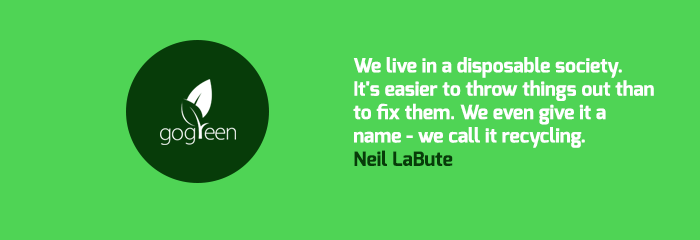
<style>
.page{position:relative;width:700px;height:240px;background:#4fd455}
.page>*{position:absolute;margin:0}
.t1{font:19.5px "Exo-Bold";color:#ffffff}
.t2{font:19.5px "Exo-Bold";color:#073c09}
</style>
<div class="page">
<p class="t1" style="left:353px;top:57px;width:301px;height:109px">We live in a disposable society. <br>It's easier to throw things out than <br>to fix them. We even give it a <br>name - we call it recycling.<br><span class="t2">Neil LaBute</span></p>
</div>
